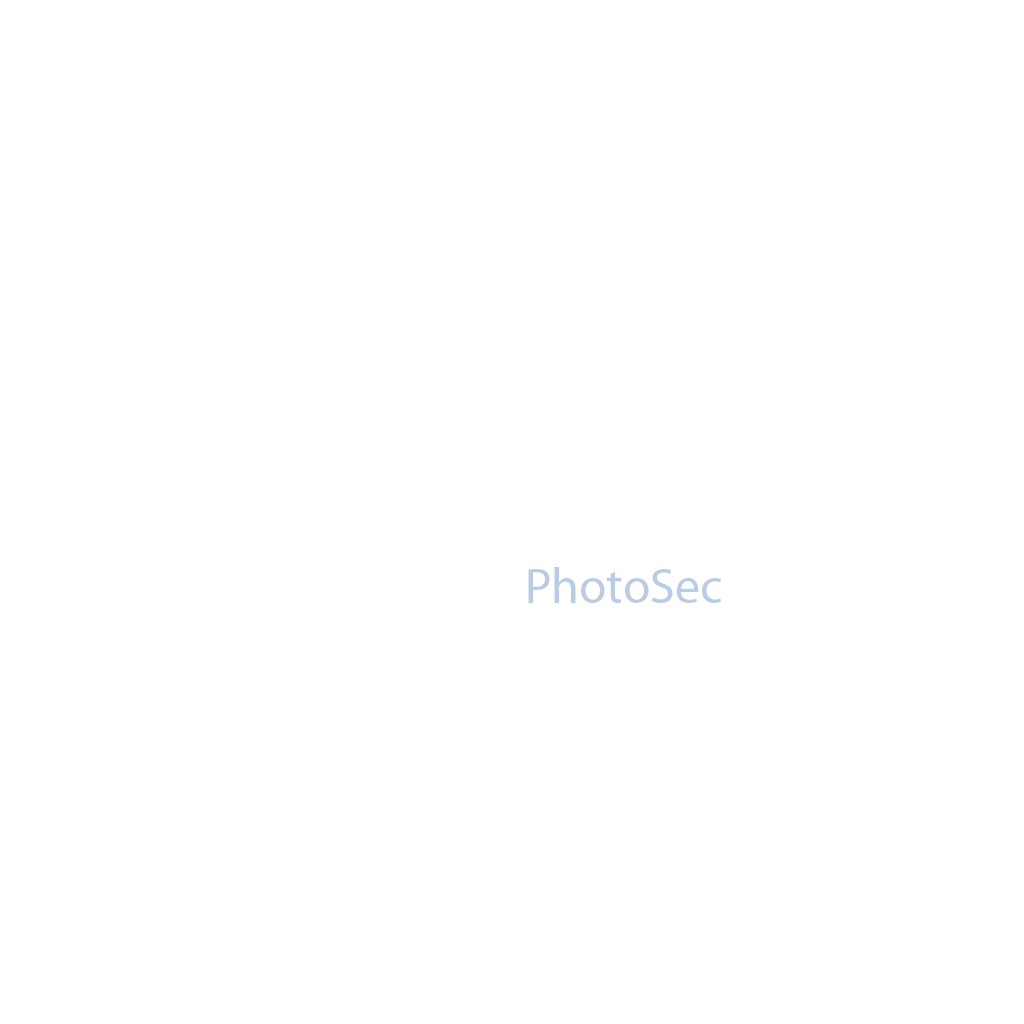
<style>
.page{position:relative;width:1024px;height:1024px;background:#ffffff}
.page>*{position:absolute;margin:0}
.t1{font:50px "MyriadPro-Regular";color:#bacce3}
</style>
<div class="page">
<p class="t1" style="left:528px;top:567px;width:193px;height:36px">PhotoSec</p>
</div>
